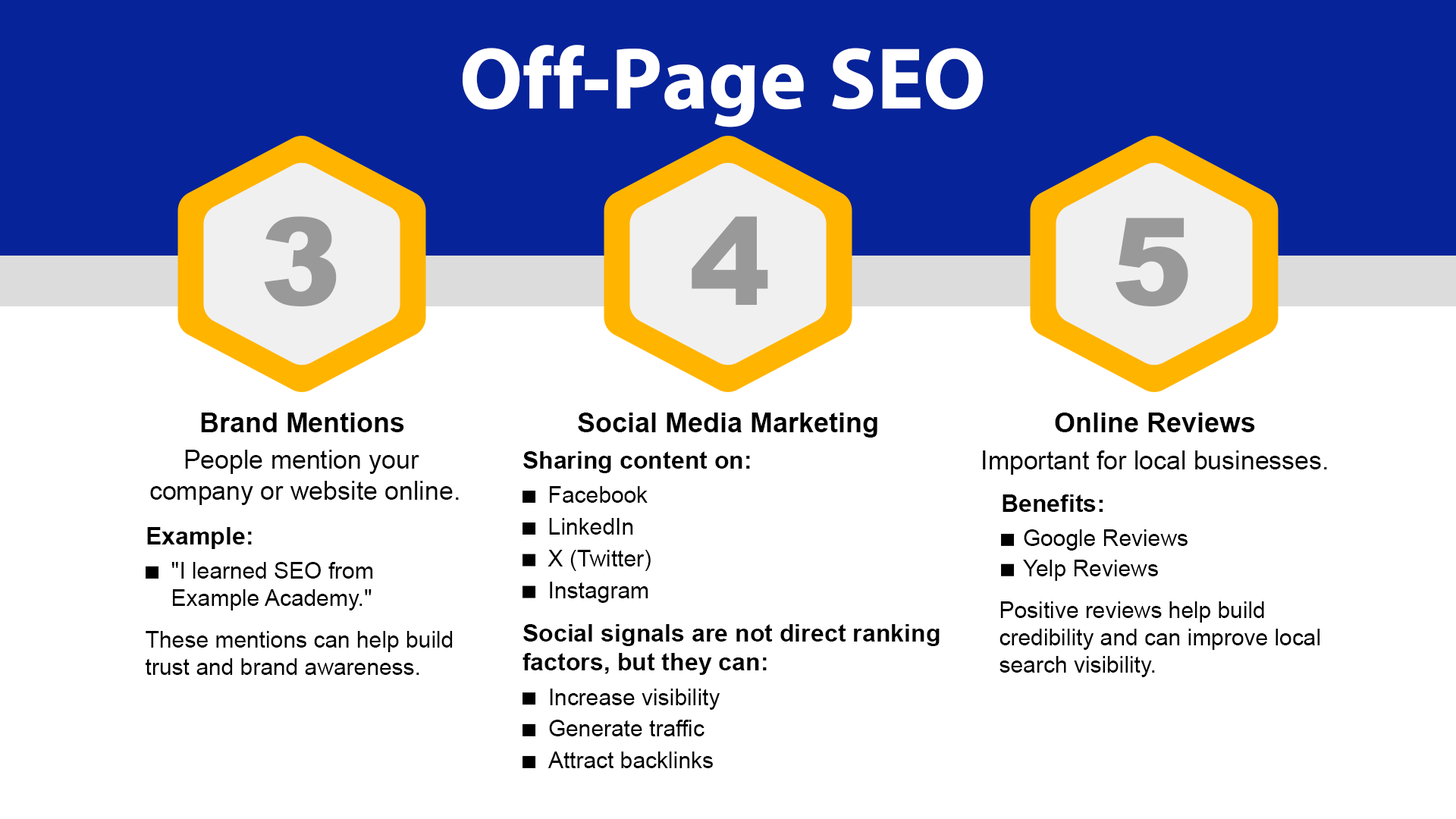
<style>
.page{position:relative;width:1456px;height:819px;background:#ffffff}
.page>*{position:absolute;margin:0}
.t1{font:88px "iKampuchea001_O'Chrov";color:#ffffff}
.t2{font:121px "Arial-Black";color:#999999}
.t3{font:27.3px "Arial-BoldMT";color:#000000}
.t4{font:25.8px "ArialMT";color:#000000}
.t5{font:24.2px "Arial-BoldMT";color:#000000}
.t6{font:22.7px "ArialMT";color:#000000}
.t7{font:23.8px "Arial-BoldMT";color:#000000}
.t8{font:24.4px "Arial-BoldMT";color:#000000}
.t9{font:22.8px "ArialMT";color:#000000}
.t10{font:24.3px "Arial-BoldMT";color:#000000}
</style>
<div class="page">
<p class="t1" style="left:463px;top:45px;width:521px;height:82px">Off-Page SEO</p>
<p class="t2" style="left:264px;top:216px;width:73px;height:90px">3</p>
<p class="t2" style="left:692px;top:216px;width:76px;height:89px">4</p>
<p class="t2" style="left:1115px;top:218px;width:73px;height:88px">5</p>
<p class="t3" style="left:201px;top:413px;width:203px;height:19px">Brand Mentions</p>
<p class="t3" style="left:578px;top:413px;width:299px;height:25px">Social Media Marketing</p>
<p class="t3" style="left:1055px;top:413px;width:200px;height:19px">Online Reviews</p>
<p class="t4" style="left:150px;top:450px;width:309px;height:55px;text-align:center">People mention your <br>company or website online.</p>
<p class="t5" style="left:523px;top:451px;width:227px;height:22px">Sharing content on:</p>
<p class="t4" style="left:983px;top:450px;width:344px;height:25px">Important for local businesses.</p>
<p class="t6" style="left:550px;top:486px;width:98px;height:17px">Facebook</p>
<p class="t5" style="left:1003px;top:494px;width:100px;height:18px">Benefits<span class="t7">:</span></p>
<p class="t6" style="left:549px;top:518px;width:84px;height:17px">LinkedIn</p>
<p class="t8" style="left:147px;top:527px;width:105px;height:22px">Example:</p>
<p class="t6" style="left:1024px;top:529px;width:164px;height:22px">Google Reviews</p>
<p class="t6" style="left:548px;top:550px;width:103px;height:21px">X (Twitter)</p>
<p class="t9" style="left:171px;top:562px;width:202px;height:48px">"I learned SEO from <br>Example Academy."</p>
<p class="t9" style="left:1023px;top:560px;width:135px;height:21px">Yelp Reviews</p>
<p class="t6" style="left:550px;top:582px;width:98px;height:21px">Instagram</p>
<p class="t6" style="left:999px;top:601px;width:320px;height:76px">Positive reviews help build <br>credibility and can improve local <br>search visibility.</p>
<p class="t10" style="left:522px;top:624px;width:418px;height:51px">Social signals are not direct ranking <br>factors, but they can:</p>
<p class="t6" style="left:146px;top:631px;width:307px;height:44px">These mentions can help build <br>trust and brand awareness.</p>
<p class="t6" style="left:550px;top:689px;width:170px;height:21px">Increase visibility</p>
<p class="t6" style="left:549px;top:720px;width:155px;height:16px">Generate traffic</p>
<p class="t6" style="left:548px;top:751px;width:165px;height:17px">Attract backlinks</p>
</div>
